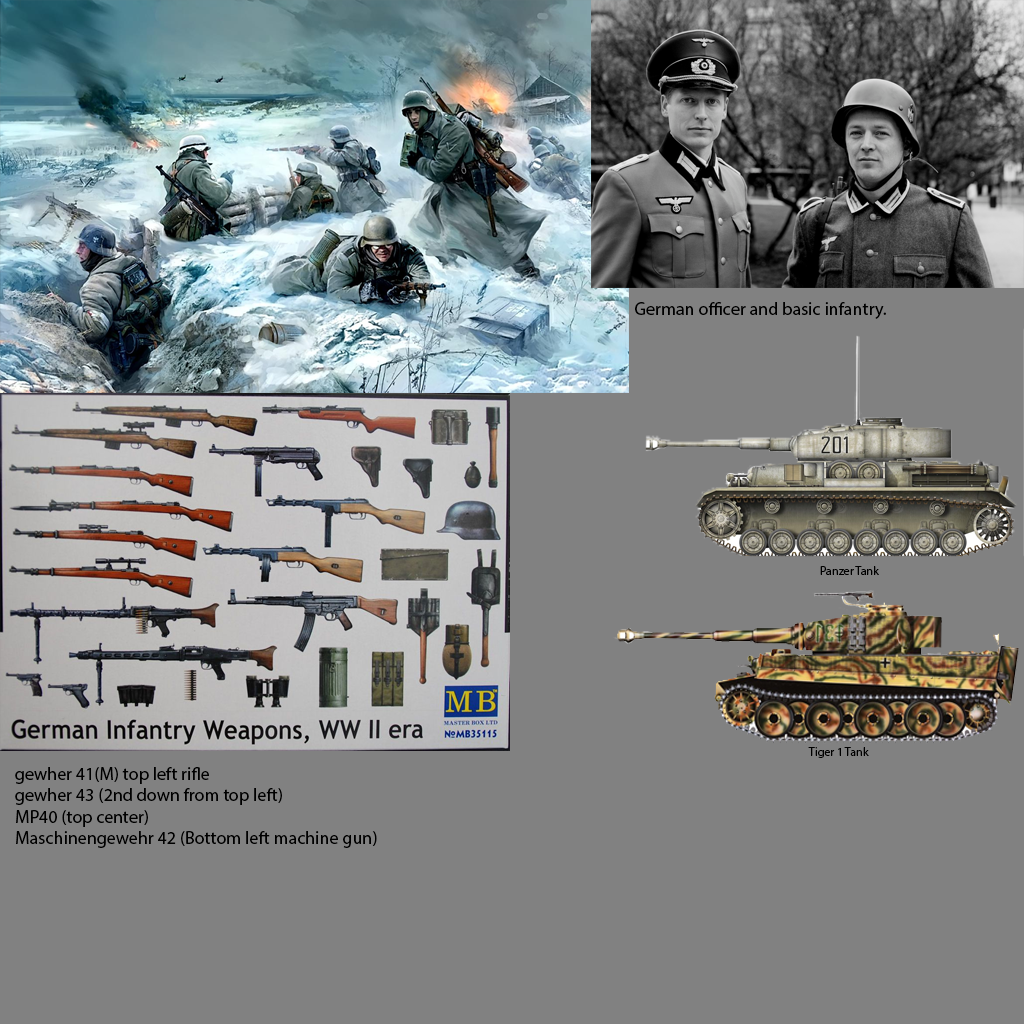
<style>
.page{position:relative;width:1024px;height:1024px;background:#818181}
.page>*{position:absolute;margin:0}
.t1{font:18px "MyriadPro-Regular";color:#000000}
.t2{font:12px "MyriadPro-Regular";color:#000000}
</style>
<div class="page">
<p class="t1" style="left:635px;top:302px;width:251px;height:17px">German officer and basic infantry.</p>
<p class="t2" style="left:820px;top:566px;width:59px;height:9px">Panzer Tank</p>
<p class="t2" style="left:808px;top:747px;width:61px;height:11px">Tiger 1 Tank</p>
<p class="t1" style="left:15px;top:767px;width:362px;height:81px">gewher 41(M) top left rifle<br>gewher 43 (2nd down from top left)<br>MP40 (top center)<br>Maschinengewehr 42 (Bottom left machine gun)</p>
</div>
